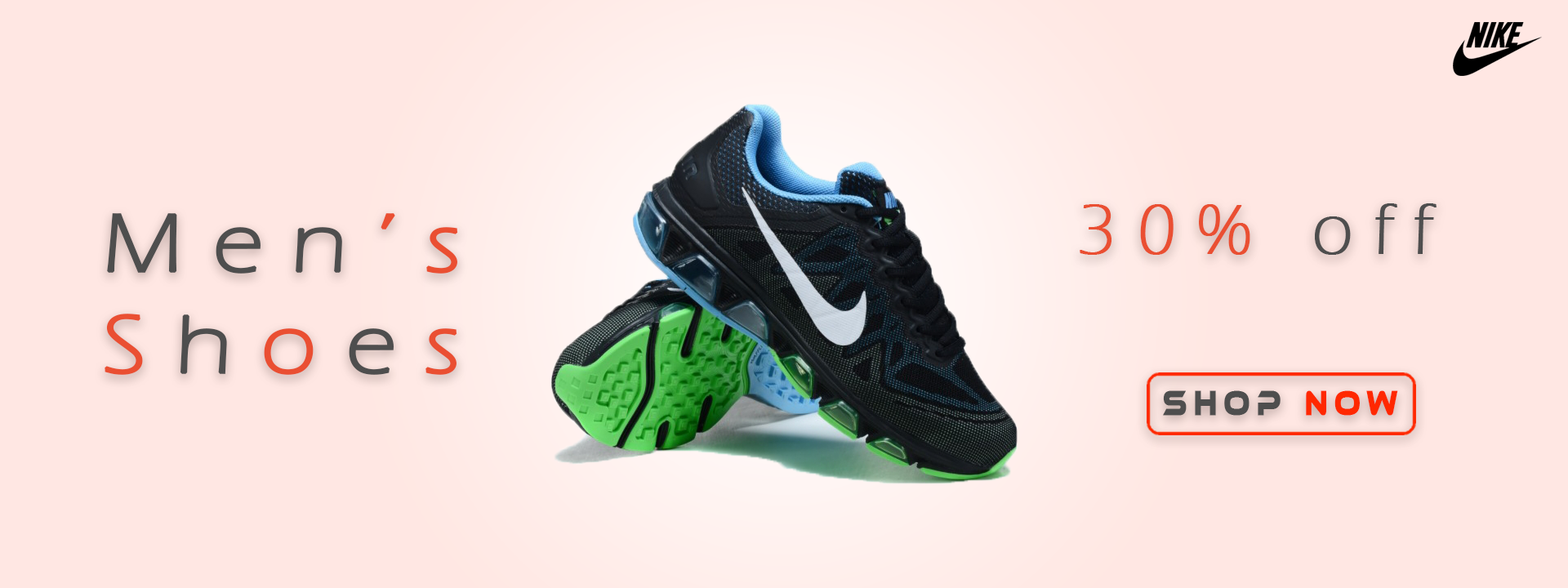
<style>
.page{position:relative;width:1568px;height:588px;background:#ffe7e3}
.page>*{position:absolute;margin:0}
.t1{font:72.6px "ErasITC-Light";letter-spacing:0.28em;color:#ea4f32;font-weight:bold}
.t2{font:72.6px "ErasITC-Light";letter-spacing:0.28em;color:#4e4e4e;font-weight:bold}
.t3{font:83.9px "ErasITC-Light";letter-spacing:0.28em;color:#ea4f32;font-weight:bold;scale:1.16 1}
.t4{font:83.9px "ErasITC-Light";letter-spacing:0.28em;color:#4e4e4e;font-weight:bold;scale:1.16 1}
.t5{font:34.5px "EthnocentricRg-Regular";letter-spacing:0.28em;color:#4e4e4e;font-weight:bold;scale:0.7 1}
.t6{font:34.5px "EthnocentricRg-Regular";letter-spacing:0.28em;color:#ff2800;font-weight:bold;scale:0.7 1}
</style>
<div class="page">
<p class="t1" style="left:1080px;top:203px;width:357px;height:52px">30% <span class="t2">off</span></p>
<p class="t3" style="left:105px;top:213px;width:353px;height:162px"><span class="t4">Men</span>’s<br>S<span class="t4">h</span>o<span class="t4">e</span>s</p>
<p class="t5" style="left:1163px;top:390px;width:235px;height:26px">Shop<span class="t6"> now</span></p>
</div>
